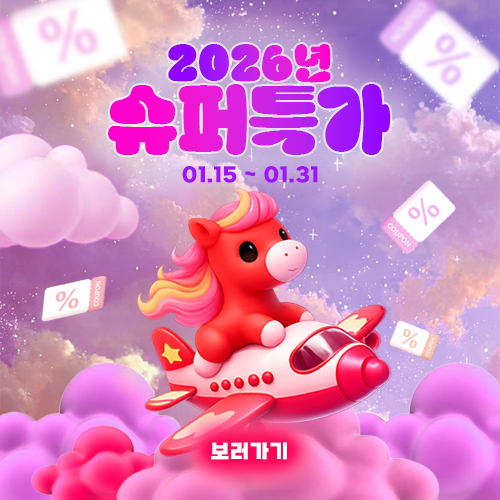
<style>
.page{position:relative;width:500px;height:500px}
.page>*{position:absolute;margin:0}
.t1{font:42px "LOTTERIACHAB"}
.t2{font:77.3px "LOTTERIACHAB";letter-spacing:-0.04em}
.t3{font:20px "SBAggroB";letter-spacing:0.025em;color:#9d15f9}
.t4{font:20px "SBAggroB";letter-spacing:0.025em;color:#ffffff}
</style>
<div class="page">
<p class="t1" style="left:168px;top:44px;width:163px;height:39px">2026년</p>
<p class="t2" style="left:108px;top:84px;width:283px;height:71px">슈퍼특가</p>
<p class="t3" style="left:182px;top:166px;width:136px;height:17px">01.15 ~ 01.31</p>
<p class="t4" style="left:211px;top:442px;width:76px;height:18px">보러가기</p>
</div>
